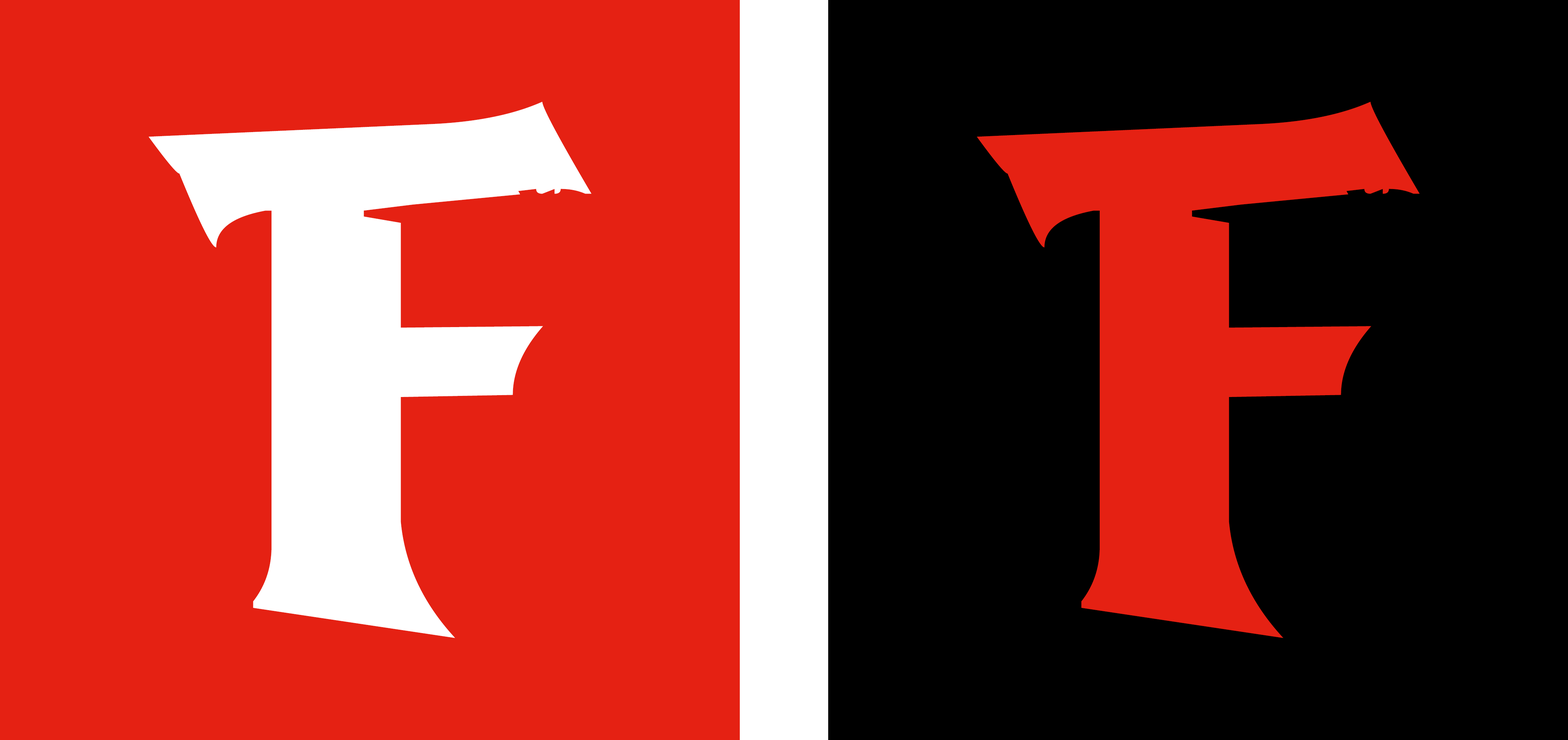
<style>
.page{position:relative;width:1568px;height:740px;background:#e52113}
.page>*{position:absolute;margin:0}
.t1{font:616.5px "BreatheFireIII";color:#ffffff}
.t2{font:616.5px "BreatheFireIII";color:#e52113}
</style>
<div class="page">
<p class="t1" style="left:149px;top:102px;width:442px;height:536px">F</p>
<p class="t2" style="left:977px;top:102px;width:443px;height:536px">F</p>
</div>
